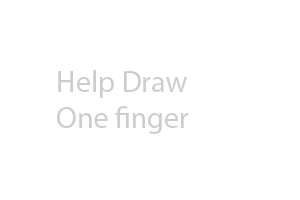
<style>
.page{position:relative;width:300px;height:200px;background:#ffffff}
.page>*{position:absolute;margin:0}
.t1{font:30px "MyriadPro-Regular";color:#cdcdcd}
</style>
<div class="page">
<p class="t1" style="left:57px;top:70px;width:132px;height:64px">Help Draw <br>One finger</p>
</div>
